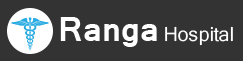
<style>
.page{position:relative;width:243px;height:61px;background:#333333}
.page>*{position:absolute;margin:0}
.t1{font:32px "Kartika-Bold";color:#ffffff}
.t2{font:19px "Kartika";color:#ffffff}
</style>
<div class="page">
<p class="t1" style="left:60px;top:17px;width:97px;height:30px">Ranga</p>
<p class="t2" style="left:165px;top:26px;width:68px;height:20px">Hospital</p>
</div>
